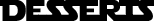
<style>
.page{position:relative;width:154px;height:22px;background:#000000}
.page>*{position:absolute;margin:0}
.t1{font:30px "StarJedi";color:#000000}
</style>
<div class="page">
<p class="t1" style="left:0px;top:0px;width:156px;height:21px">DeSSeRTS</p>
</div>
